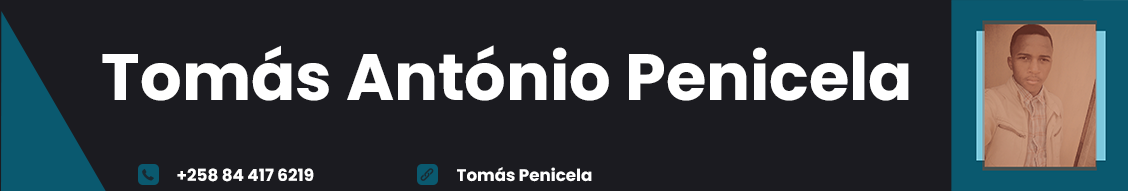
<style>
.page{position:relative;width:1128px;height:191px;background:#1b1b20}
.page>*{position:absolute;margin:0}
.t1{font:65.4px "Poppins-Bold";color:#ffffff}
.t2{font:16.7px "Poppins-Bold";color:#ffffff}
</style>
<div class="page">
<p class="t1" style="left:102px;top:45px;width:807px;height:56px">Tomás António Penicela</p>
<p class="t2" style="left:177px;top:168px;width:137px;height:14px">+258 84 417 6219</p>
<p class="t2" style="left:457px;top:167px;width:135px;height:15px">Tomás Penicela</p>
</div>
